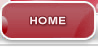
<style>
.page{position:relative;width:98px;height:48px}
.page>*{position:absolute;margin:0}
.t1{font:10.3px "Arial-BoldMT";letter-spacing:0.025em;color:#ffffff;scale:1.16 1}
</style>
<div class="page">
<p class="t1" style="left:30px;top:16px;width:36px;height:9px">HOME</p>
</div>
